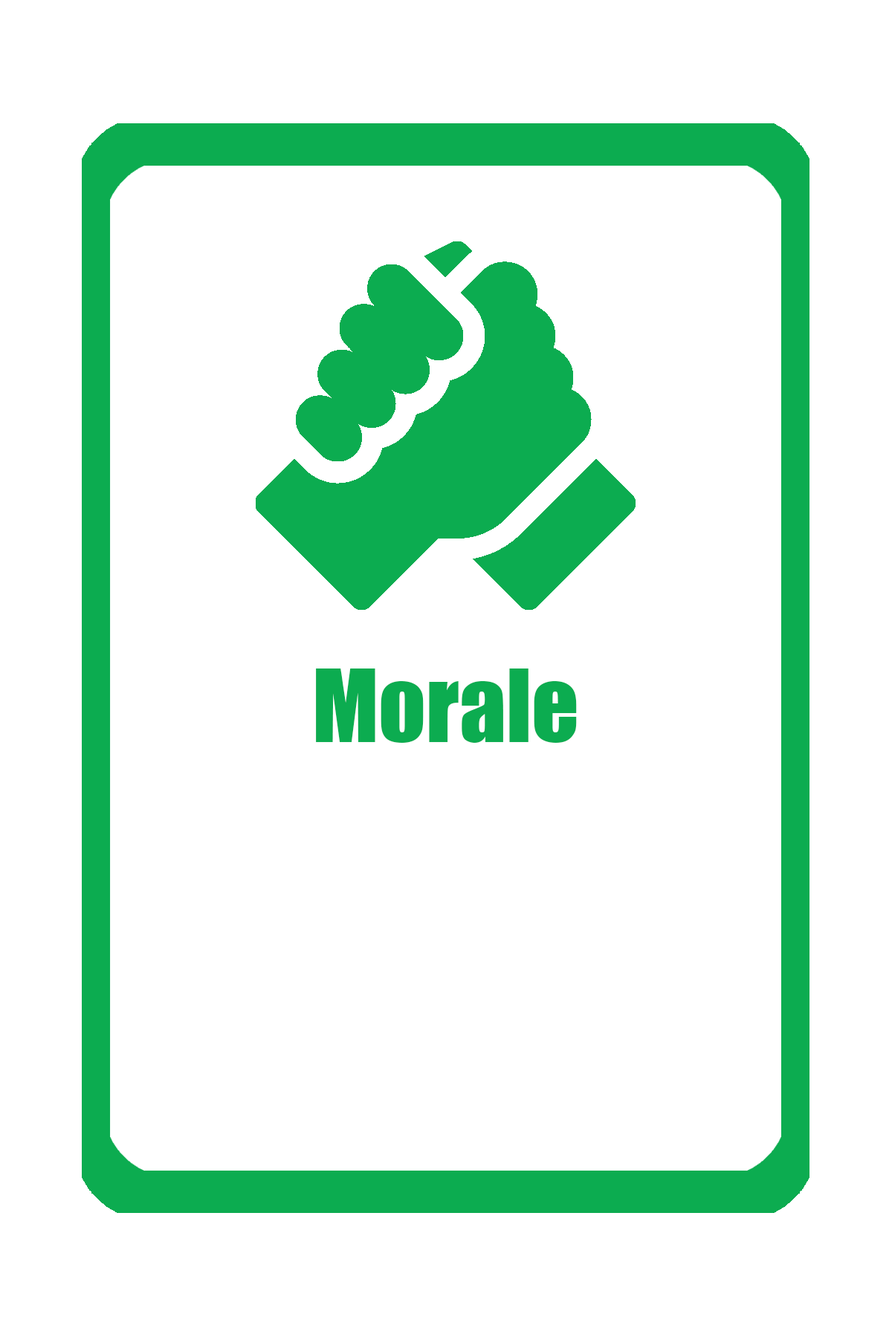
<style>
.page{position:relative;width:892px;height:1337px;background:#ffffff}
.page>*{position:absolute;margin:0}
.t1{font:92.9px "Impact";color:#0cac50}
</style>
<div class="page">
<p class="t1" style="left:316px;top:669px;width:261px;height:74px">Morale</p>
</div>
